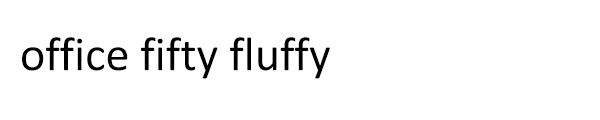
<style>
.page{position:relative;width:600px;height:120px;background:#ffffff}
.page>*{position:absolute;margin:0}
.t1{font:48px "Calibri";color:#000000}
</style>
<div class="page">
<p class="t1" style="left:22px;top:37px;width:308px;height:42px">office fifty fluffy</p>
</div>
